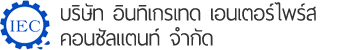
<style>
.page{position:relative;width:350px;height:50px;background:#ffffff}
.page>*{position:absolute;margin:0}
.t1{font:28px "ThaiSansNeue-Light";color:#333333}
</style>
<div class="page">
<p class="t1" style="left:61px;top:2px;width:255px;height:19px">บริษัท อินทิเกรเทด เอนเตอร์ไพร์ส</p>
<p class="t1" style="left:61px;top:27px;width:152px;height:19px">คอนซัลแตนท์ จำกัด</p>
</div>
